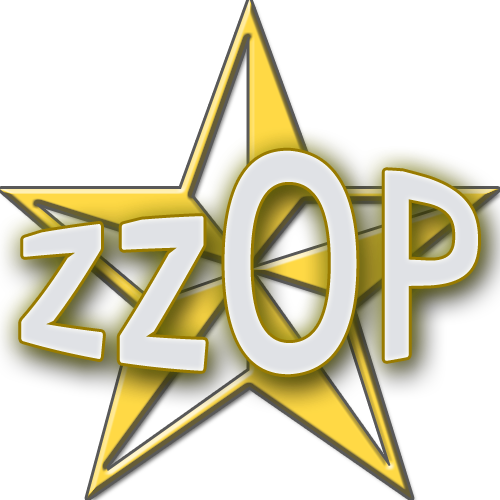
<style>
.page{position:relative;width:500px;height:500px;background:#ffffff}
.page>*{position:absolute;margin:0}
.t1{font:200px "Mentone-SemiBold";color:#e0e2e6}
</style>
<div class="page">
<p class="t1" style="left:21px;top:150px;width:457px;height:225px">zzOP</p>
</div>
